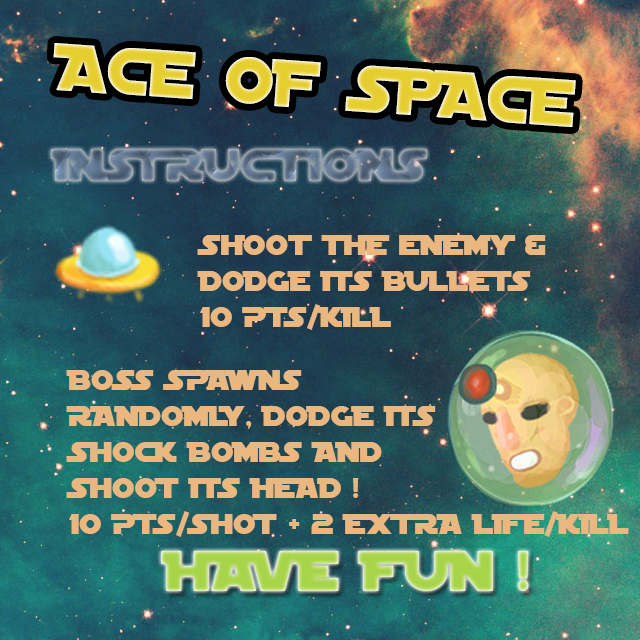
<style>
.page{position:relative;width:640px;height:640px}
.page>*{position:absolute;margin:0}
.t1{font:48px "SFDistantGalaxyAlternate"}
.t2{font:30px "SFDistantGalaxyAlternate";color:#ebb780}
.t3{font:60px "SFDistantGalaxyAlternate";color:#a8d44a}
</style>
<div class="page">
<p class="t1" style="left:51px;top:149px;width:376px;height:32px">INSTRUCTIONS</p>
<p class="t2" style="left:197px;top:235px;width:349px;height:95px">Shoot the enemy &amp; <br>DODGE ITS BULLETS<br>10 PTS/KILL</p>
<p class="t2" style="left:66px;top:370px;width:563px;height:167px">BOSS SPAWNS <br>RANDOMLY, DODGE ITS<br>SHOCK BOMBS AND<br>SHOOT ITS HEAD !<br>10 PTS/SHOT + 2 EXTRA LIFE/KILL</p>
<p class="t3" style="left:161px;top:551px;width:368px;height:40px">HAVE FUN !</p>
</div>
